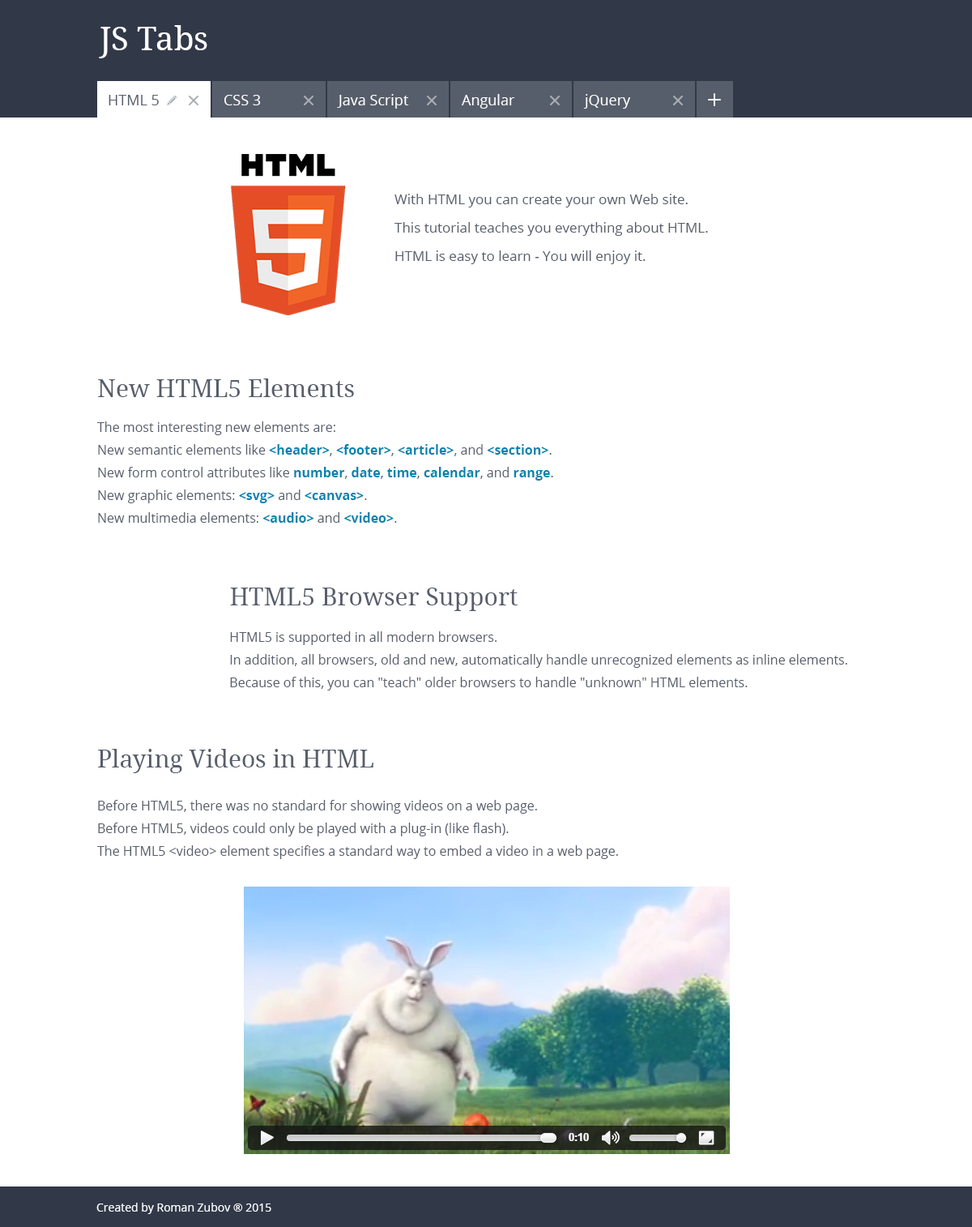
<style>
.page{position:relative;width:972px;height:1227px;background:#ffffff}
.page>*{position:absolute;margin:0}
.t1{font:32.4px "NotoSerif";color:#ffffff}
.t2{font:14.6px "OpenSans";color:#575e6b;text-transform:uppercase}
.t3{font:14.6px "OpenSans";color:#ffffff;text-transform:uppercase}
.t4{font:14.6px "OpenSans";color:#ffffff}
.t5{font:13.8px/28.4px "OpenSans";color:#575e6b}
.t6{font:24.3px "NotoSerif";color:#575e6b}
.t7{font:13px/22.7px "OpenSans";color:#575e6b}
.t8{font:13px/22.7px "OpenSans-Bold";color:#0084b0}
.t9{font:11.3px "OpenSans";color:#ffffff}
</style>
<div class="page">
<p class="t1" style="left:99px;top:25px;width:108px;height:33px">JS Tabs</p>
<p class="t2" style="left:109px;top:95px;width:50px;height:10px">HTML 5</p>
<p class="t3" style="left:224px;top:95px;width:37px;height:10px">CSS 3</p>
<p class="t4" style="left:337px;top:94px;width:72px;height:15px"><span class="t3">J</span>ava Script</p>
<p class="t4" style="left:462px;top:94px;width:53px;height:15px">Angular</p>
<p class="t4" style="left:583px;top:94px;width:47px;height:15px">jQuery</p>
<p class="t5" style="left:395px;top:194px;width:313px;height:70px">With HTML you can create your own Web site.<br>This tutorial teaches you everything about HTML.<br>HTML is easy to learn - You will enjoy it.</p>
<p class="t6" style="left:98px;top:378px;width:256px;height:19px">New HTML5 Elements</p>
<p class="t7" style="left:97px;top:421px;width:456px;height:102px">The most interesting new elements are: <br>New semantic elements like <span class="t8">&lt;header&gt;</span>, <span class="t8">&lt;footer&gt;</span>, <span class="t8">&lt;article&gt;</span>, and <span class="t8">&lt;section&gt;</span>.<br>New form control attributes like <span class="t8">number</span>, <span class="t8">date</span>, <span class="t8">time</span>, <span class="t8">calendar</span>, and <span class="t8">range</span>.<br>New graphic elements: <span class="t8">&lt;svg&gt;</span> and <span class="t8">&lt;canvas&gt;</span>.<br>New multimedia elements: <span class="t8">&lt;audio&gt;</span> and <span class="t8">&lt;video&gt;</span>.</p>
<p class="t6" style="left:230px;top:587px;width:288px;height:24px">HTML5 Browser Support</p>
<p class="t7" style="left:230px;top:631px;width:617px;height:59px">HTML5 is supported in all modern browsers.<br>In addition, all browsers, old and new, automatically handle unrecognized elements as inline elements.<br>Because of this, you can "teach" older browsers to handle "unknown" HTML elements.</p>
<p class="t6" style="left:98px;top:749px;width:275px;height:24px">Playing Videos in HTML</p>
<p class="t7" style="left:97px;top:800px;width:521px;height:59px">Before HTML5, there was no standard for showing videos on a web page.<br>Before HTML5, videos could only be played with a plug-in (like flash).<br>The HTML5 &lt;video&gt; element specifies a standard way to embed a video in a web page.</p>
<p class="t9" style="left:96px;top:1202px;width:175px;height:12px">Created by Roman Zubov ® 2015</p>
</div>
